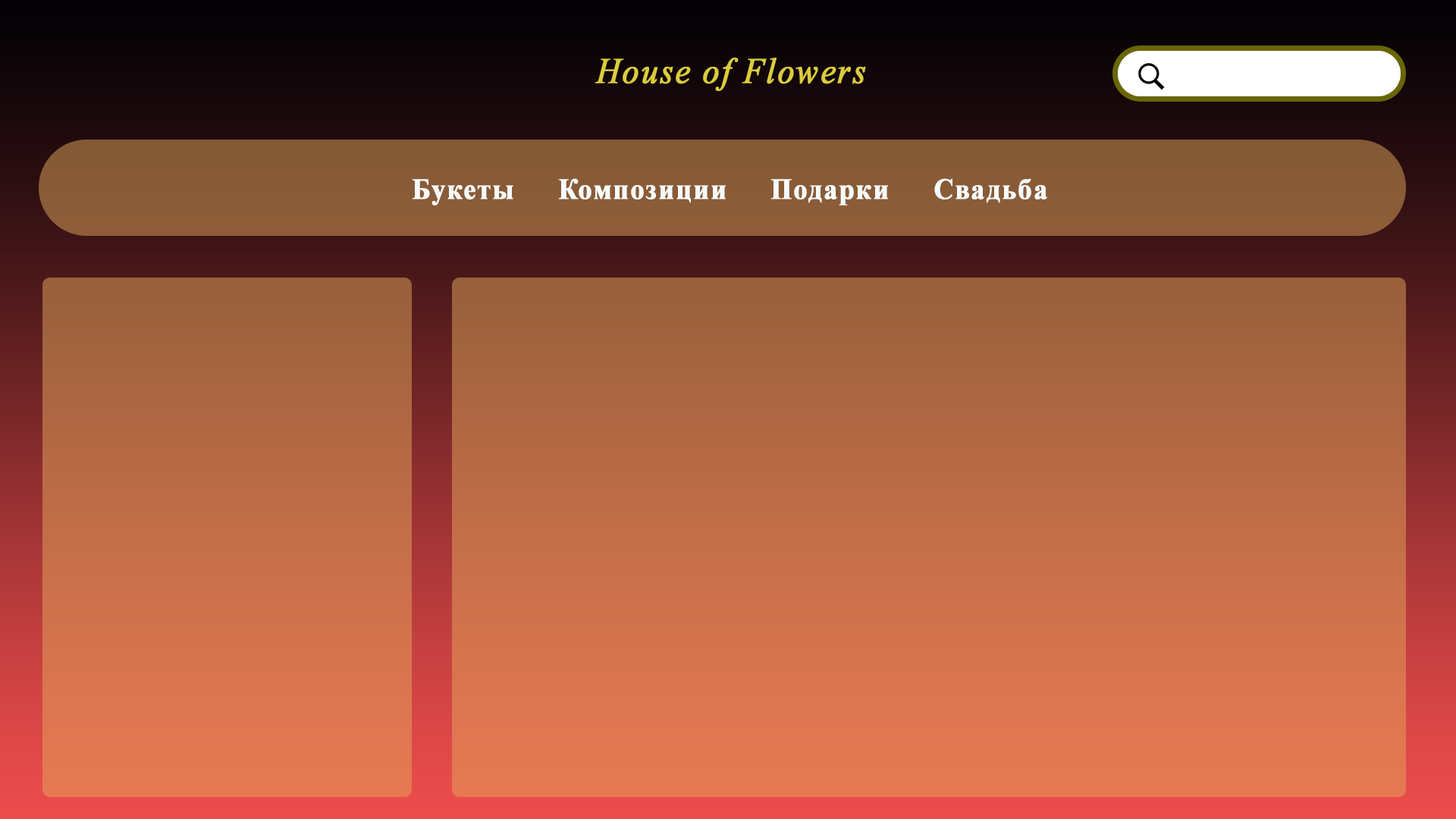
<style>
.page{position:relative;width:1456px;height:819px}
.page>*{position:absolute;margin:0}
.t1{font:36px "TimesNewRomanPS-ItalicMT";letter-spacing:0.04em;color:#dbcc3d;font-weight:bold;scale:0.92 1}
.t2{font:29.4px "TimesNewRomanPS-BoldMT";letter-spacing:0.04em;color:#f7fbfc;font-weight:bold;scale:0.92 1}
</style>
<div class="page">
<p class="t1" style="left:595px;top:58px;width:271px;height:33px">House of Flowers</p>
<p class="t2" style="left:412px;top:178px;width:635px;height:28px">Букеты     Композиции     Подарки     Свадьба</p>
</div>
